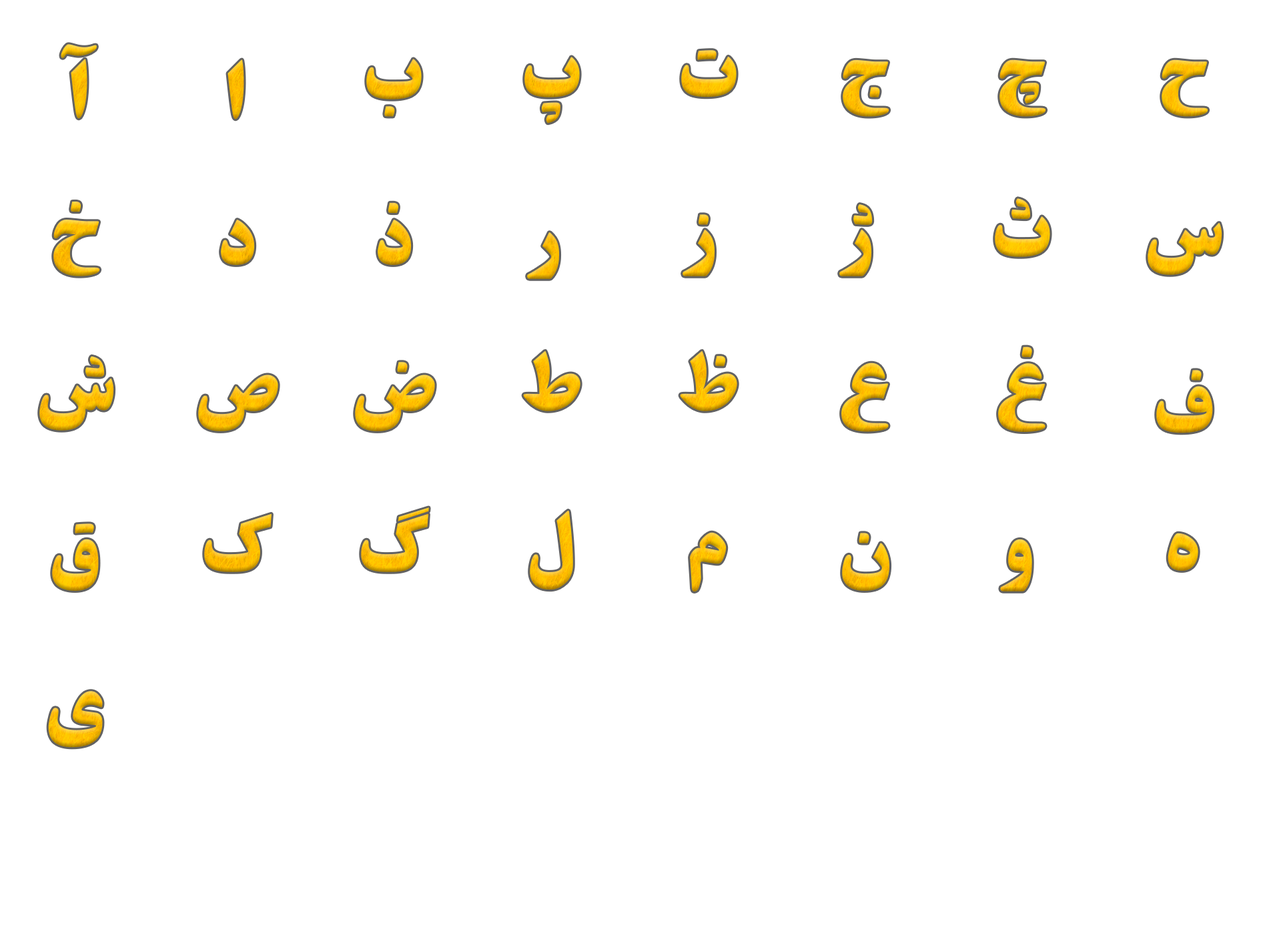
<style>
.page{position:relative;width:1261px;height:946px;background:#ffffff}
.page>*{position:absolute;margin:0}
.t1{font:80.6px "Digi-Titr-Line-Bold";color:#ffcc00}
.t2{font:80.6px "Digi-Titr-Line-Bold"}
</style>
<div class="page">
<p class="t1" style="left:61px;top:44px;width:36px;height:75px">آ</p>
<p class="t2" style="left:681px;top:50px;width:56px;height:47px">ت</p>
<p class="t1" style="left:228px;top:59px;width:16px;height:60px">ا</p>
<p class="t2" style="left:366px;top:59px;width:56px;height:58px">ب</p>
<p class="t2" style="left:524px;top:57px;width:56px;height:66px">پ</p>
<p class="t2" style="left:843px;top:59px;width:46px;height:58px">ج</p>
<p class="t2" style="left:1000px;top:59px;width:46px;height:58px">چ</p>
<p class="t2" style="left:1162px;top:59px;width:46px;height:58px">ح</p>
<p class="t2" style="left:53px;top:201px;width:47px;height:75px">خ</p>
<p class="t2" style="left:378px;top:202px;width:34px;height:63px">ذ</p>
<p class="t2" style="left:839px;top:204px;width:34px;height:72px">ژ</p>
<p class="t2" style="left:995px;top:198px;width:55px;height:59px">ث</p>
<p class="t2" style="left:221px;top:220px;width:34px;height:45px">د</p>
<p class="t2" style="left:683px;top:214px;width:32px;height:62px">ز</p>
<p class="t2" style="left:527px;top:232px;width:33px;height:47px">ر</p>
<p class="t1" style="left:1148px;top:223px;width:74px;height:52px">س</p>
<p class="t2" style="left:523px;top:350px;width:58px;height:61px">ط</p>
<p class="t2" style="left:680px;top:350px;width:57px;height:61px">ظ</p>
<p class="t2" style="left:998px;top:346px;width:48px;height:86px">غ</p>
<p class="t2" style="left:39px;top:356px;width:75px;height:74px">ش</p>
<p class="t2" style="left:355px;top:362px;width:80px;height:69px">ض</p>
<p class="t2" style="left:841px;top:362px;width:48px;height:70px">ع</p>
<p class="t2" style="left:198px;top:374px;width:80px;height:57px">ص</p>
<p class="t2" style="left:1156px;top:370px;width:57px;height:63px">ف</p>
<p class="t2" style="left:361px;top:507px;width:68px;height:65px">گ</p>
<p class="t1" style="left:530px;top:510px;width:43px;height:80px">ل</p>
<p class="t2" style="left:204px;top:513px;width:68px;height:59px">ک</p>
<p class="t2" style="left:52px;top:523px;width:47px;height:68px">ق</p>
<p class="t2" style="left:690px;top:532px;width:37px;height:59px">م</p>
<p class="t2" style="left:842px;top:532px;width:48px;height:59px">ن</p>
<p class="t1" style="left:1168px;top:532px;width:30px;height:39px">ه</p>
<p class="t2" style="left:1000px;top:538px;width:32px;height:53px">و</p>
<p class="t2" style="left:48px;top:691px;width:55px;height:56px">ی</p>
</div>
